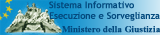
<style>
.page{position:relative;width:160px;height:35px}
.page>*{position:absolute;margin:0}
.t1{font:9px "TrebuchetMS";color:#044a7e;font-weight:bold}
.t2{font:9px "TimesNewRomanPS-BoldMT";letter-spacing:-0.01em;color:#044a7e;font-weight:bold}
</style>
<div class="page">
<p class="t1" style="left:49px;top:1px;width:111px;height:20px">Sistema Informativo<br>Esecuzione e Sorveglianza</p>
<p class="t2" style="left:62px;top:26px;width:99px;height:7px">Ministero della Giustizia</p>
</div>
